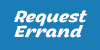
<style>
.page{position:relative;width:100px;height:50px;background:#1a7db6}
.page>*{position:absolute;margin:0}
.t1{font:16px/15px "ArturoTrial-BoldItalic";color:#ffffff;font-style:italic}
</style>
<div class="page">
<p class="t1" style="left:14px;top:10px;width:73px;height:28px">Request Errand</p>
</div>
